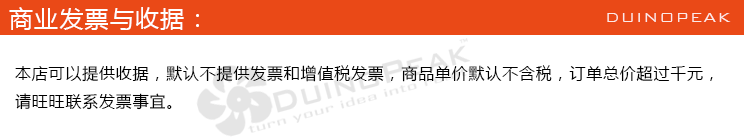
<style>
.page{position:relative;width:744px;height:137px;background:#ffffff}
.page>*{position:absolute;margin:0}
.t1{font:24px "MicrosoftYaHei";letter-spacing:0.05em;color:#ffffff}
.t2{font:18px "BankGothicBT-Light";letter-spacing:0.05em;color:#ffffff}
.t3{font:16px "MicrosoftYaHei";letter-spacing:0.05em;color:#000000}
</style>
<div class="page">
<p class="t1" style="left:9px;top:7px;width:190px;height:23px">商业发票与收据：</p>
<p class="t2" style="left:607px;top:13px;width:124px;height:9px;opacity:0.85">DUINOPEAK</p>
<p class="t3" style="left:15px;top:65px;width:698px;height:45px">本店可以提供收据，默认不提供发票和增值税发票，商品单价默认不含税，订单总价超过千元，<br>请旺旺联系发票事宜。</p>
</div>
